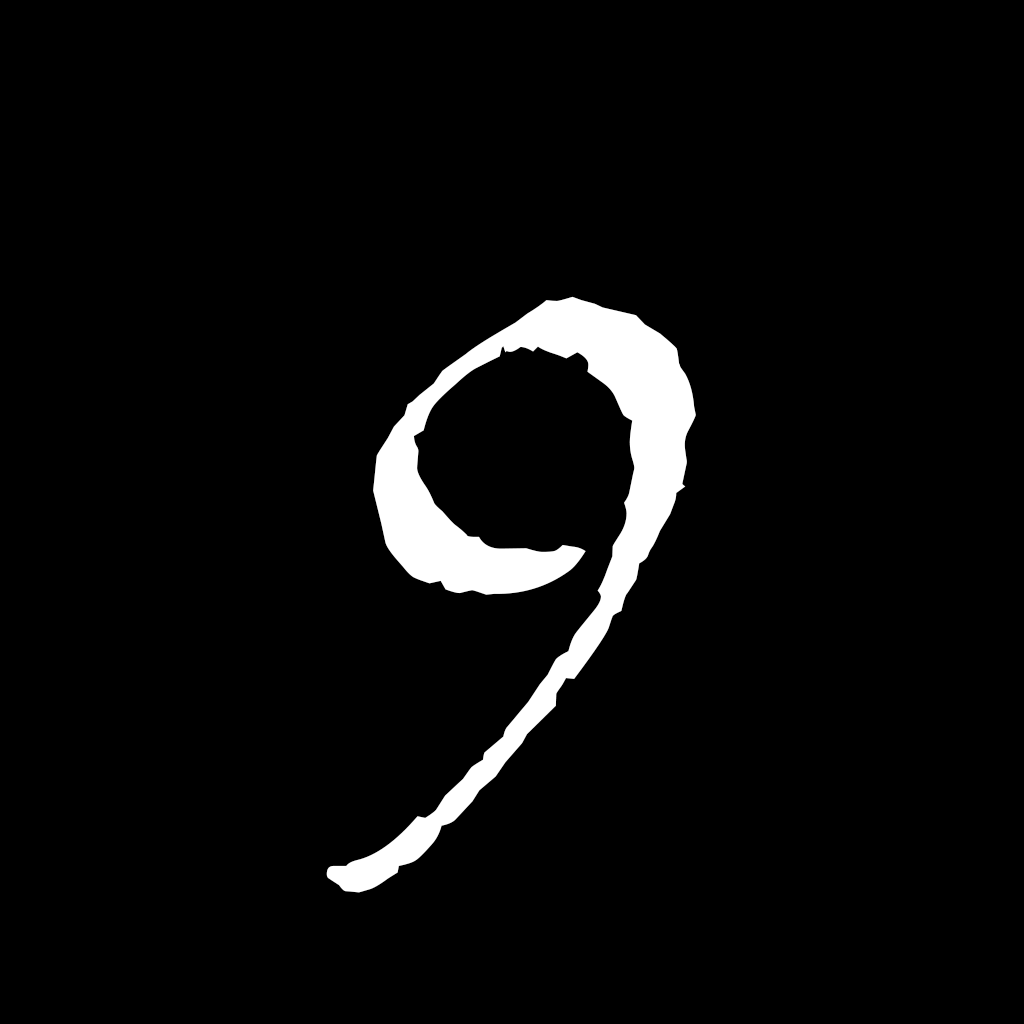
<style>
.page{position:relative;width:1024px;height:1024px;background:#000000}
.page>*{position:absolute;margin:0}
.t1{font:833.3px "Papyrus-Regular";color:#ffffff}
</style>
<div class="page">
<p class="t1" style="left:326px;top:296px;width:370px;height:597px">9</p>
</div>
